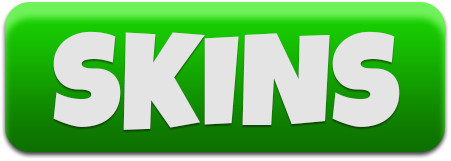
<style>
.page{position:relative;width:451px;height:161px;background:#e4e4e4}
.page>*{position:absolute;margin:0}
.t1{font:130px "LuckiestGuy-Regular";color:#e4e4e4;text-transform:uppercase}
</style>
<div class="page">
<p class="t1" style="left:53px;top:31px;width:347px;height:99px">Skins</p>
</div>
